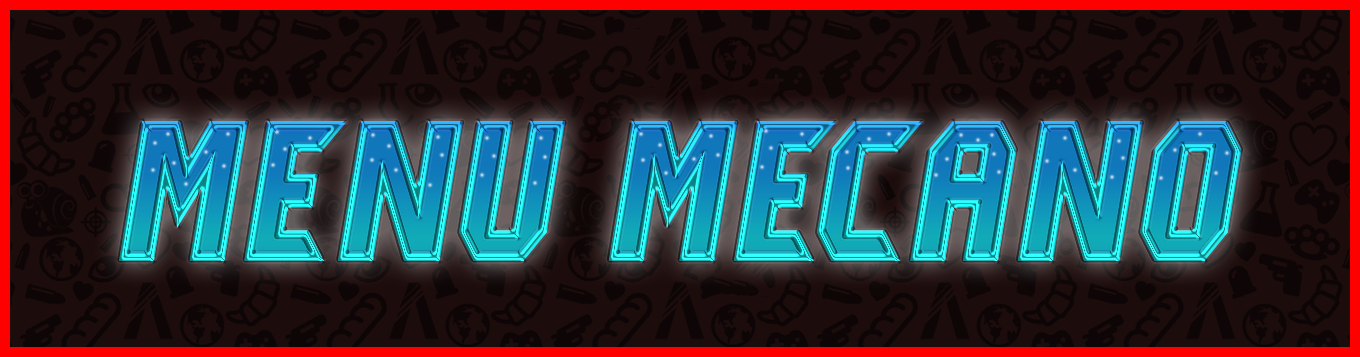
<style>
.page{position:relative;width:1360px;height:357px;background:#1d0c0c}
.page>*{position:absolute;margin:0}
.t1{font:200px "LostAngeles-Italic";scale:1.05 1}
</style>
<div class="page">
<p class="t1" style="left:119px;top:121px;width:1123px;height:140px">Menu mEcano</p>
</div>
